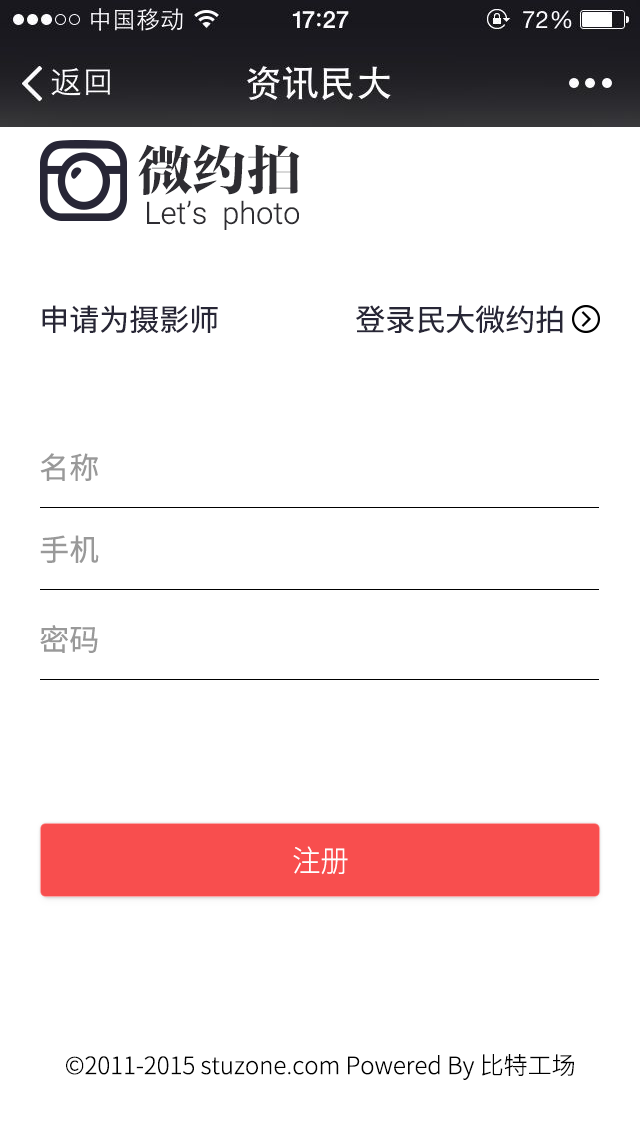
<style>
.page{position:relative;width:640px;height:1136px;background:#ffffff}
.page>*{position:absolute;margin:0}
.t1{font:54.5px "FZFYSJW--GB1-0";color:#2e2d32}
.t2{font:30.7px "Roboto-Light";color:#2e2d32}
.t3{font:30px "NotoSansHans-Regular";color:#272636}
.t4{font:30px "NotoSansHans-Regular";color:#999999}
.t5{font:30px "NotoSansHans-Light";color:#ffffff;scale:0.94 1}
.t6{font:24px "NotoSansHans-Light";color:#000000}
</style>
<div class="page">
<p class="t1" style="left:138px;top:144px;width:162px;height:51px">微约拍</p>
<p class="t2" style="left:147px;top:200px;width:152px;height:30px">Let’s  photo</p>
<p class="t3" style="left:42px;top:305px;width:176px;height:28px">申请为摄影师</p>
<p class="t3" style="left:356px;top:305px;width:207px;height:29px">登录民大微约拍</p>
<p class="t4" style="left:40px;top:453px;width:58px;height:28px">名称</p>
<p class="t4" style="left:40px;top:535px;width:59px;height:28px">手机</p>
<p class="t4" style="left:40px;top:625px;width:58px;height:28px">密码</p>
<p class="t5" style="left:293px;top:846px;width:55px;height:29px">注册</p>
<p class="t6" style="left:66px;top:1054px;width:508px;height:26px">©2011-2015 stuzone.com Powered By 比特工场</p>
</div>
